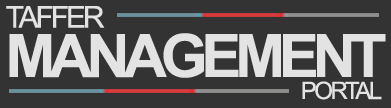
<style>
.page{position:relative;width:391px;height:108px;background:#333333}
.page>*{position:absolute;margin:0}
.t1{font:30px "ArialMT";letter-spacing:-0.103em;color:#e3e3e3}
.t2{font:60px "Arial-BoldMT";letter-spacing:-0.103em;color:#e3e3e3}
.t3{font:24px "ArialMT";letter-spacing:-0.103em;color:#e3e3e3}
</style>
<div class="page">
<p class="t1" style="left:6px;top:6px;width:99px;height:22px">TAFFER</p>
<p class="t2" style="left:9px;top:33px;width:377px;height:45px">MANAGEMENT</p>
<p class="t3" style="left:302px;top:81px;width:80px;height:19px">PORTAL</p>
</div>
